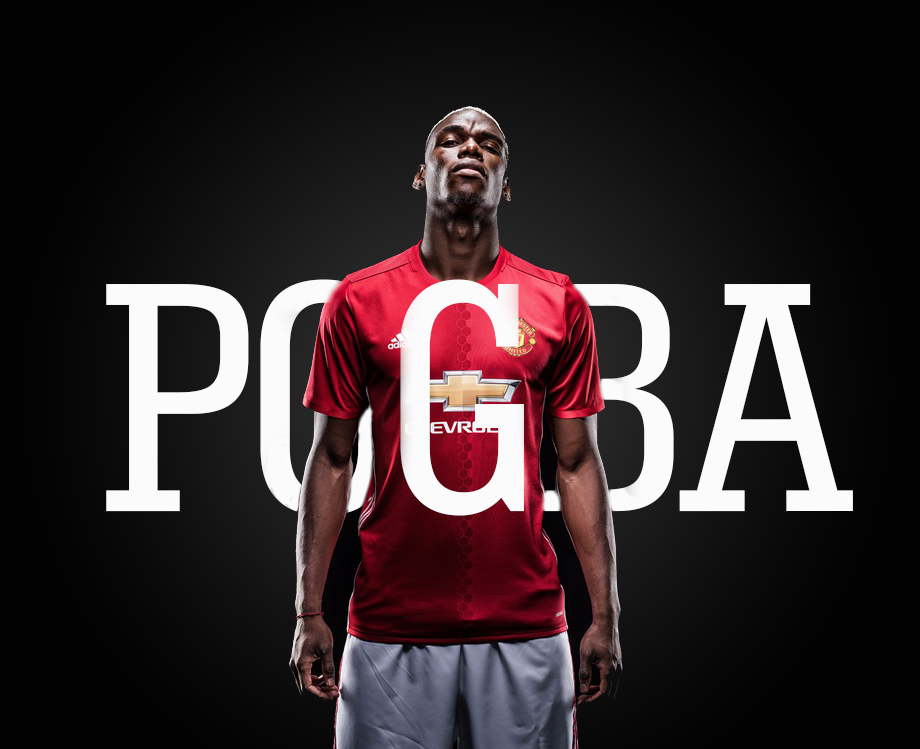
<style>
.page{position:relative;width:920px;height:749px}
.page>*{position:absolute;margin:0}
.t1{font:333.3px "Vf-Geo-Condense";letter-spacing:-0.025em;color:#fbfbfb}
</style>
<div class="page">
<p class="t1" style="left:106px;top:279px;width:747px;height:237px">POGBA</p>
</div>
